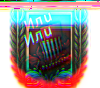
<style>
.page{position:relative;width:100px;height:88px}
.page>*{position:absolute;margin:0}
.t1{font:16px "MyriadPro-It";letter-spacing:0.075em}
</style>
<div class="page">
<p class="t1" style="left:24px;top:11px;width:28px;height:20px;rotate:-28deg">Или</p>
</div>
